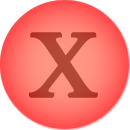
<style>
.page{position:relative;width:130px;height:130px}
.page>*{position:absolute;margin:0}
.t1{font:120px "Kokila";color:#b34533;font-weight:bold}
</style>
<div class="page">
<p class="t1" style="left:29px;top:32px;width:69px;height:66px">X</p>
</div>
